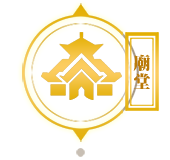
<style>
.page{position:relative;width:170px;height:160px;background:#ffffff}
.page>*{position:absolute;margin:0}
.t1{font:17.9px/17.1px "DATM9";letter-spacing:0.02em;color:#ba7908}
</style>
<div class="page">
<p class="t1" style="left:133px;top:54px;width:17px;height:35px;text-align:center">廟堂</p>
</div>
